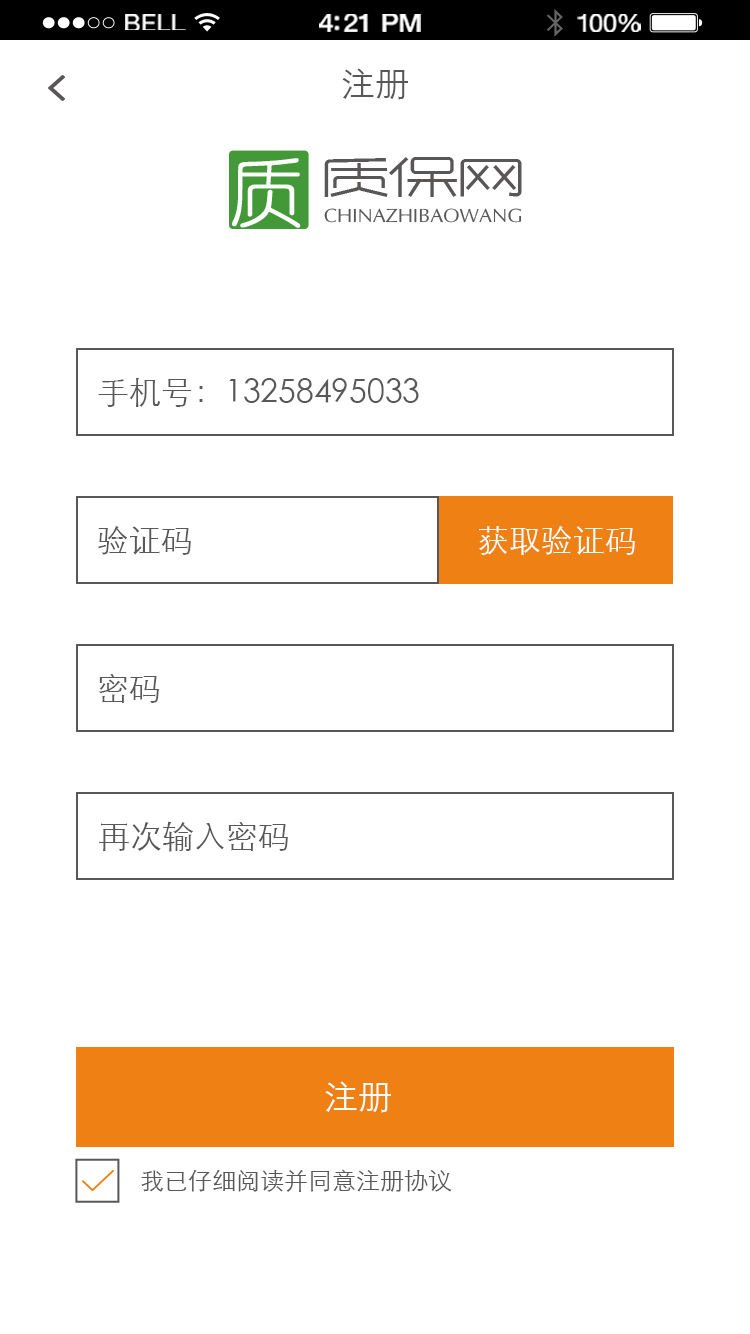
<style>
.page{position:relative;width:750px;height:1334px;background:#ffffff}
.page>*{position:absolute;margin:0}
.t1{font:23.3px "HelveticaNeue";letter-spacing:0.02em;color:#ffffff;scale:1.06 1}
.t2{font:25.3px "HelveticaNeue-Medium";letter-spacing:-0.02em;color:#ffffff;scale:1.06 1}
.t3{font:24.3px "HelveticaNeue";letter-spacing:-0.02em;color:#ffffff;scale:1.06 1}
.t4{font:34px "STXihei";color:#595757}
.t5{font:32px "STXihei";color:#595757}
.t6{font:32px "STXihei";color:#ffffff}
.t7{font:34px "STXihei";color:#ffffff}
.t8{font:24px "STXihei";color:#595757}
</style>
<div class="page">
<p class="t1" style="left:125px;top:14px;width:61px;height:16px">BELL</p>
<p class="t2" style="left:319px;top:14px;width:102px;height:18px">4:21 PM</p>
<p class="t3" style="left:577px;top:14px;width:64px;height:18px">100%</p>
<p class="t4" style="left:342px;top:68px;width:66px;height:32px">注册</p>
<p class="t5" style="left:98px;top:377px;width:321px;height:30px">手机号：13258495033</p>
<p class="t5" style="left:98px;top:526px;width:93px;height:29px">验证码</p>
<p class="t6" style="left:479px;top:526px;width:156px;height:29px">获取验证码</p>
<p class="t5" style="left:98px;top:674px;width:61px;height:29px">密码</p>
<p class="t5" style="left:99px;top:821px;width:189px;height:31px">再次输入密码</p>
<p class="t7" style="left:325px;top:1081px;width:66px;height:32px">注册</p>
<p class="t8" style="left:141px;top:1169px;width:311px;height:23px">我已仔细阅读并同意注册协议</p>
</div>
